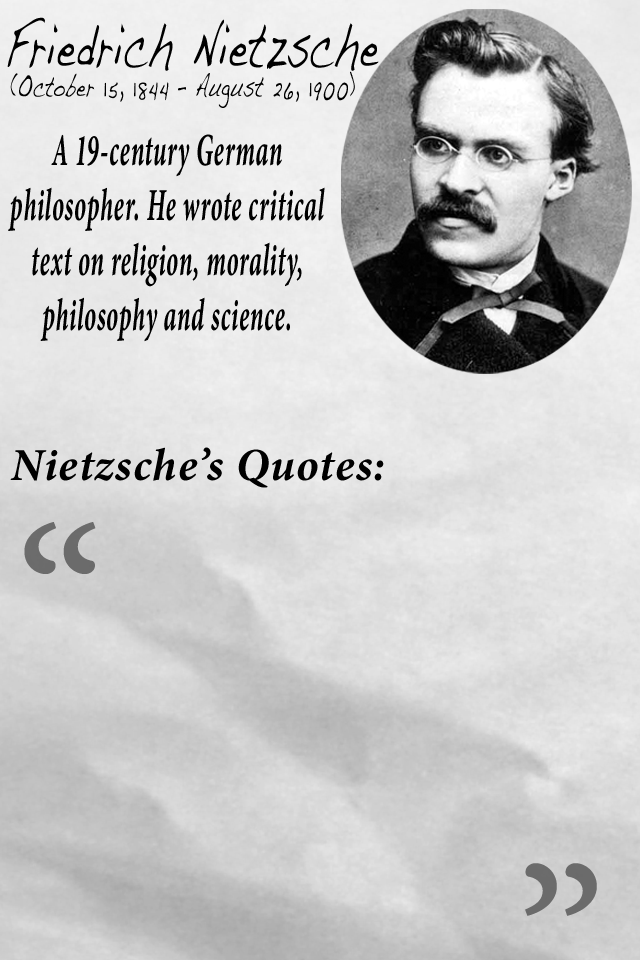
<style>
.page{position:relative;width:640px;height:960px}
.page>*{position:absolute;margin:0}
.t1{font:63.7px "Handwriting-Dakota";letter-spacing:0.03em;color:#000000;scale:0.59 1}
.t2{font:29.2px "Handwriting-Dakota";letter-spacing:0.03em;color:#000000;scale:0.63 1}
.t3{font:45.8px "MinionPro-BoldIt";letter-spacing:0.03em;color:#000000;scale:0.53 1}
.t4{font:45.8px "MinionPro-BoldIt";letter-spacing:0.03em;color:#000000}
.t5{font:225px "MinionPro-Regular";letter-spacing:0.03em;color:#5a5a5a}
</style>
<div class="page">
<p class="t1" style="left:7px;top:17px;width:372px;height:54px">Friedrich Nietzsche</p>
<p class="t2" style="left:10px;top:71px;width:345px;height:37px">(October 15, 1844 – August 26, 1900)</p>
<p class="t3" style="left:8px;top:134px;width:317px;height:208px;text-align:center">A 19-century German<br>philosopher. He wrote critical<br>text on religion, morality,<br>philosophy and science.</p>
<p class="t4" style="left:10px;top:447px;width:374px;height:41px">Nietzsche’s Quotes:</p>
<p class="t5" style="left:24px;top:522px;width:72px;height:52px;opacity:0.85">“</p>
<p class="t5" style="left:525px;top:863px;width:72px;height:53px;opacity:0.85">”</p>
</div>
